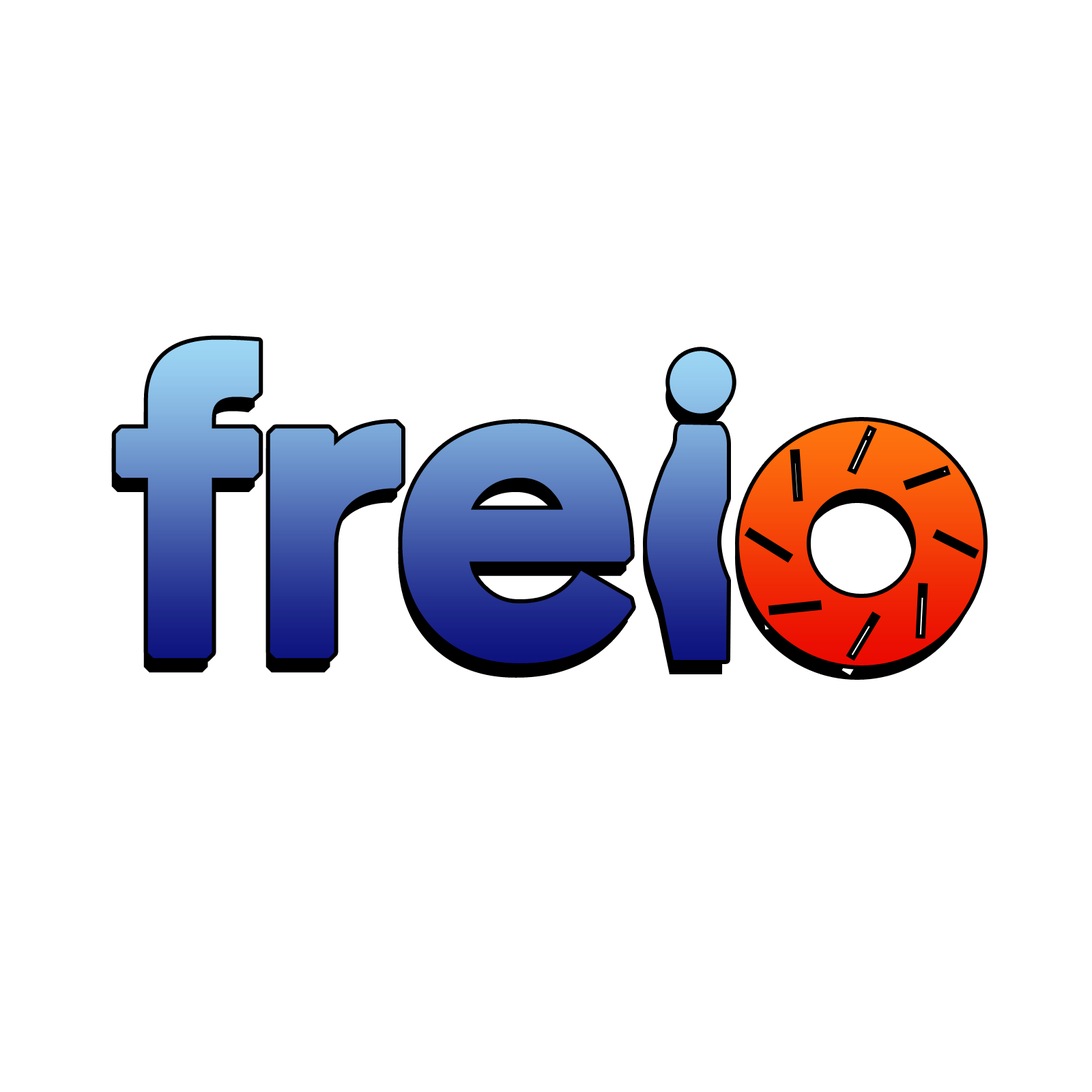
<style>
.page{position:relative;width:1092px;height:1092px;background:#ffffff}
.page>*{position:absolute;margin:0}
.t1{font:431.3px "ReznorBroken";letter-spacing:-0.04em;font-weight:bold}
</style>
<div class="page">
<p class="t1" style="left:115px;top:339px;width:517px;height:324px">fre</p>
</div>
